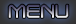
<style>
.page{position:relative;width:76px;height:24px}
.page>*{position:absolute;margin:0}
.t1{font:18px "Astrolyte"}
</style>
<div class="page">
<p class="t1" style="left:8px;top:4px;width:61px;height:14px">MENU</p>
</div>
